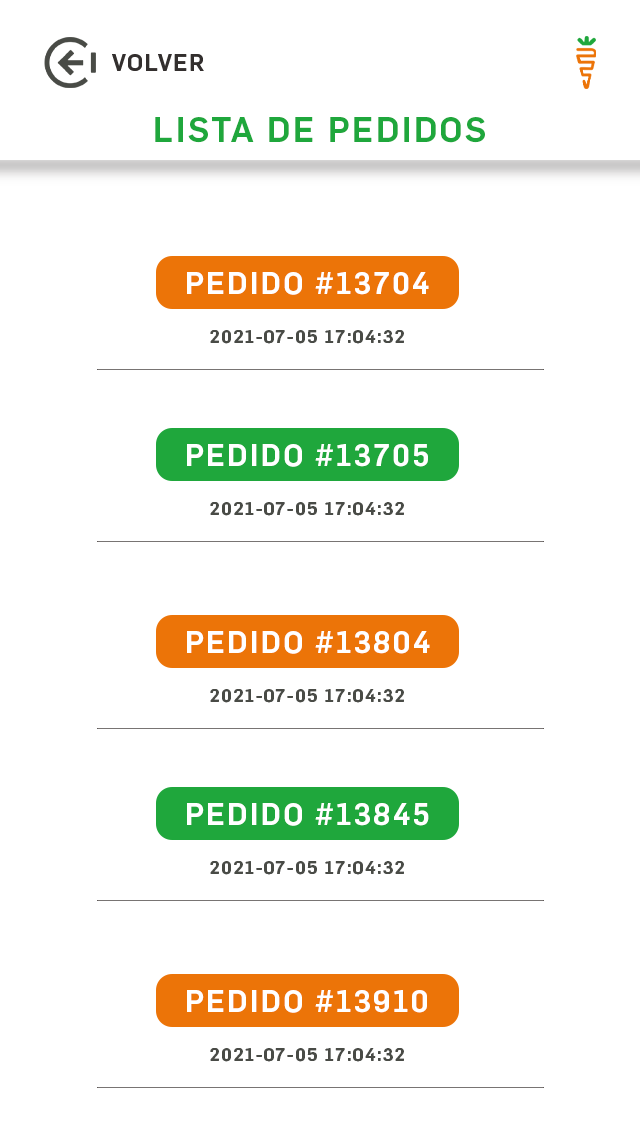
<style>
.page{position:relative;width:640px;height:1136px;background:#ffffff}
.page>*{position:absolute;margin:0}
.t1{font:34px "Flama-Medium";letter-spacing:0.075em;color:#1fa73c}
.t2{font:30px "Flama-Medium";letter-spacing:0.075em;color:#ffffff}
.t3{font:18px "Flama-Medium";letter-spacing:0.075em;color:#494b46}
</style>
<div class="page">
<p class="t1" style="left:155px;top:117px;width:330px;height:26px">LISTA DE PEDIDOS</p>
<p class="t2" style="left:187px;top:272px;width:242px;height:23px">PEDIDO #13704</p>
<p class="t3" style="left:210px;top:330px;width:194px;height:14px">2021-07-05 17:04:32</p>
<p class="t2" style="left:187px;top:444px;width:241px;height:23px">PEDIDO #13705</p>
<p class="t3" style="left:210px;top:502px;width:194px;height:14px">2021-07-05 17:04:32</p>
<p class="t2" style="left:187px;top:631px;width:243px;height:23px">PEDIDO #13804</p>
<p class="t3" style="left:210px;top:689px;width:194px;height:14px">2021-07-05 17:04:32</p>
<p class="t2" style="left:187px;top:803px;width:242px;height:23px">PEDIDO #13845</p>
<p class="t3" style="left:210px;top:861px;width:194px;height:14px">2021-07-05 17:04:32</p>
<p class="t2" style="left:187px;top:990px;width:240px;height:23px">PEDIDO #13910</p>
<p class="t3" style="left:210px;top:1048px;width:194px;height:14px">2021-07-05 17:04:32</p>
</div>
